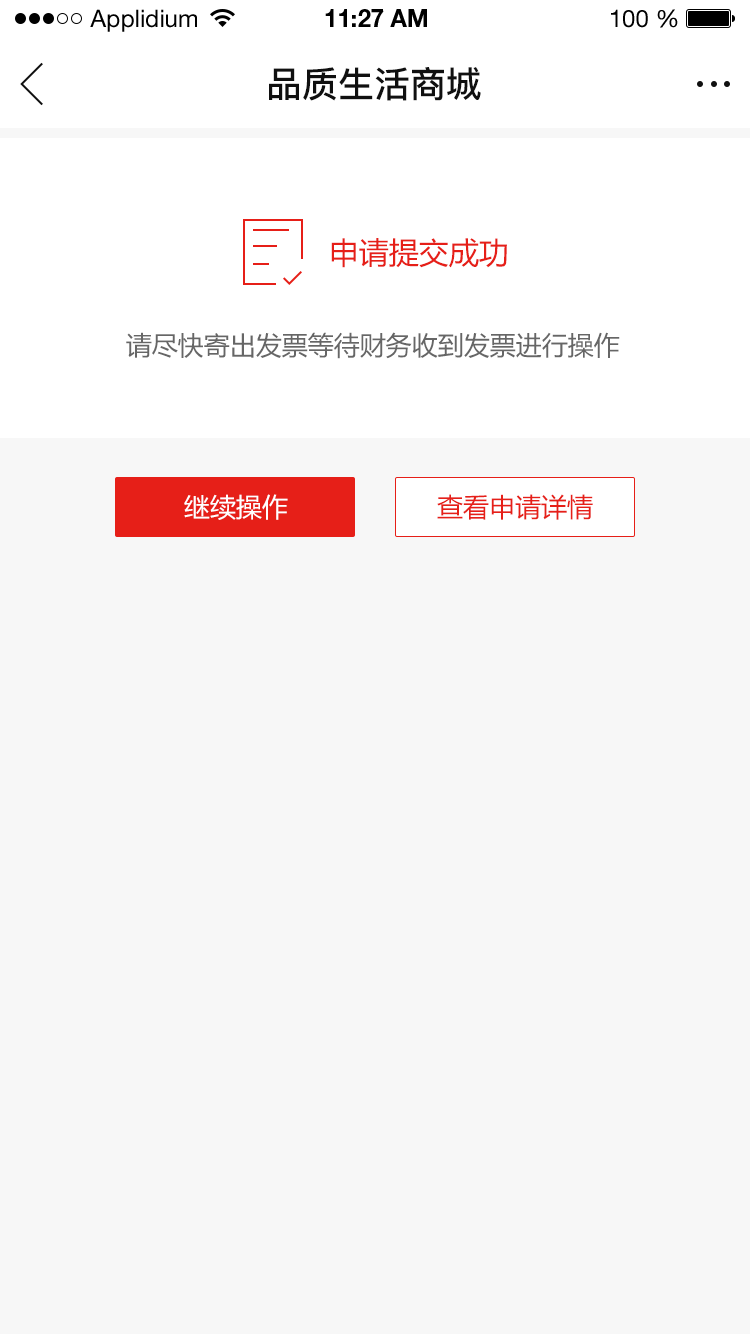
<style>
.page{position:relative;width:750px;height:1334px;background:#f7f7f7}
.page>*{position:absolute;margin:0}
.t1{font:24px "HelveticaNeueLTStd-Roman";color:#000000}
.t2{font:24px "HelveticaNeueLTStd-Bd";color:#000000}
.t3{font:36px "PingFang-SC-Bold";color:#101010;text-transform:uppercase}
.t4{font:30px "MicrosoftYaHei";color:#e61f18;text-transform:uppercase}
.t5{font:26px "MicrosoftYaHei";color:#666666;text-transform:uppercase}
.t6{font:26px "MicrosoftYaHei";color:#ffffff;text-transform:uppercase}
.t7{font:26px "MicrosoftYaHei";color:#e61f18;text-transform:uppercase}
</style>
<div class="page">
<p class="t1" style="left:90px;top:9px;width:107px;height:23px">Applidium</p>
<p class="t2" style="left:325px;top:9px;width:102px;height:18px">11:27 AM</p>
<p class="t1" style="left:611px;top:9px;width:67px;height:19px">100 %</p>
<p class="t3" style="left:269px;top:67px;width:212px;height:34px">品质生活商城</p>
<p class="t4" style="left:331px;top:238px;width:176px;height:30px">申请提交成功</p>
<p class="t5" style="left:126px;top:332px;width:494px;height:27px">请尽快寄出发票等待财务收到发票进行操作</p>
<p class="t6" style="left:184px;top:494px;width:104px;height:26px">继续操作</p>
<p class="t7" style="left:437px;top:494px;width:156px;height:26px">查看申请详情</p>
</div>
